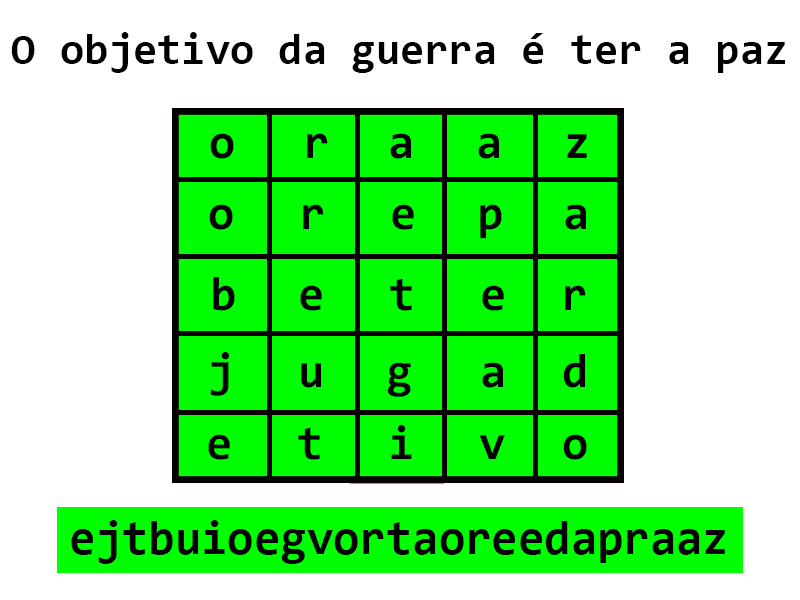
<style>
.page{position:relative;width:800px;height:600px;background:#ffffff}
.page>*{position:absolute;margin:0}
.t1{font:44.1px "Consolas-Bold";color:#000000}
.t2{font:48.1px "Consolas-Bold";color:#000000}
.t3{font:48px "Consolas-Bold";color:#000000}
</style>
<div class="page">
<p class="t1" style="left:11px;top:32px;width:774px;height:41px">O objetivo da guerra é ter a paz</p>
<p class="t2" style="left:210px;top:133px;width:24px;height:26px">o</p>
<p class="t2" style="left:307px;top:133px;width:21px;height:25px">r</p>
<p class="t2" style="left:390px;top:133px;width:21px;height:26px">a</p>
<p class="t2" style="left:478px;top:133px;width:21px;height:26px">a</p>
<p class="t2" style="left:567px;top:134px;width:20px;height:24px">z</p>
<p class="t2" style="left:209px;top:204px;width:24px;height:26px">o</p>
<p class="t2" style="left:303px;top:204px;width:21px;height:25px">r</p>
<p class="t2" style="left:392px;top:204px;width:22px;height:26px">e</p>
<p class="t2" style="left:480px;top:204px;width:22px;height:35px">p</p>
<p class="t2" style="left:565px;top:204px;width:21px;height:26px">a</p>
<p class="t2" style="left:213px;top:277px;width:22px;height:34px">b</p>
<p class="t2" style="left:390px;top:278px;width:22px;height:33px">t</p>
<p class="t2" style="left:300px;top:285px;width:22px;height:26px">e</p>
<p class="t2" style="left:482px;top:285px;width:22px;height:26px">e</p>
<p class="t2" style="left:565px;top:285px;width:21px;height:25px">r</p>
<p class="t2" style="left:210px;top:352px;width:19px;height:44px">j</p>
<p class="t2" style="left:301px;top:363px;width:20px;height:25px">u</p>
<p class="t2" style="left:387px;top:362px;width:24px;height:35px">g</p>
<p class="t2" style="left:482px;top:362px;width:21px;height:26px">a</p>
<p class="t2" style="left:563px;top:354px;width:22px;height:34px">d</p>
<p class="t2" style="left:391px;top:425px;width:21px;height:34px">i</p>
<p class="t2" style="left:208px;top:434px;width:22px;height:26px">e</p>
<p class="t2" style="left:298px;top:427px;width:22px;height:33px">t</p>
<p class="t2" style="left:479px;top:435px;width:26px;height:24px">v</p>
<p class="t2" style="left:563px;top:434px;width:24px;height:26px">o</p>
<p class="t3" style="left:71px;top:520px;width:654px;height:44px">ejtbuioegvortaoreedapraaz</p>
</div>
